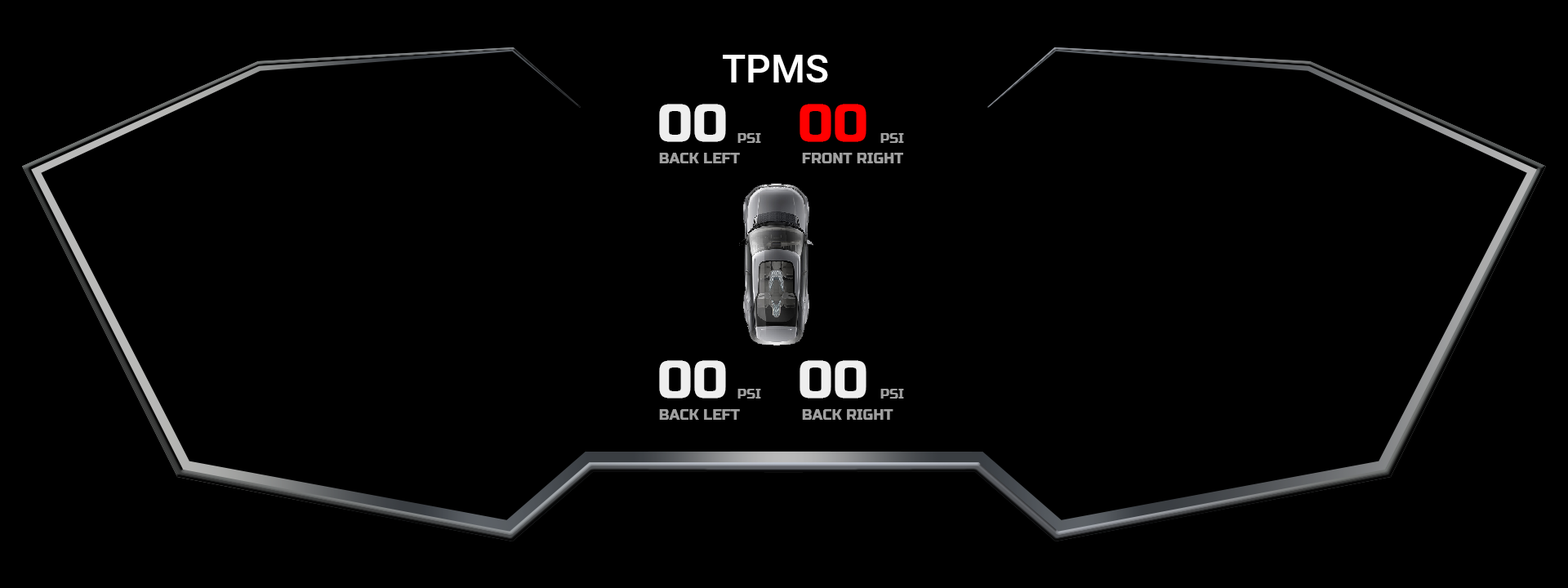
<style>
.page{position:relative;width:1568px;height:588px;background:#000000}
.page>*{position:absolute;margin:0}
.t1{font:39.2px "Roboto-Medium";color:#ffffff}
.t2{font:52.3px "RussoOne";color:#eeeeee}
.t3{font:52.3px "RussoOne";color:#ff0000}
.t4{font:13.1px "RussoOne";color:#a0a0a0}
.t5{font:14.7px "RussoOne";color:#a0a0a0}
</style>
<div class="page">
<p class="t1" style="left:723px;top:55px;width:105px;height:27px">TPMS</p>
<p class="t2" style="left:659px;top:104px;width:67px;height:38px">00</p>
<p class="t3" style="left:800px;top:104px;width:66px;height:38px">00</p>
<p class="t4" style="left:737px;top:133px;width:24px;height:10px">PSI</p>
<p class="t4" style="left:880px;top:133px;width:24px;height:10px">PSI</p>
<p class="t5" style="left:659px;top:153px;width:81px;height:10px">BACK LEFT</p>
<p class="t5" style="left:802px;top:153px;width:101px;height:10px">FRONT RIGHT</p>
<p class="t2" style="left:659px;top:360px;width:67px;height:39px">00</p>
<p class="t2" style="left:800px;top:360px;width:66px;height:39px">00</p>
<p class="t4" style="left:737px;top:389px;width:24px;height:10px">PSI</p>
<p class="t4" style="left:880px;top:389px;width:24px;height:10px">PSI</p>
<p class="t5" style="left:659px;top:409px;width:81px;height:11px">BACK LEFT</p>
<p class="t5" style="left:802px;top:409px;width:91px;height:11px">BACK RIGHT</p>
</div>
